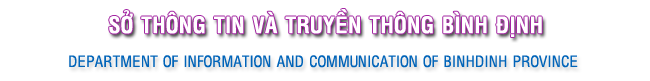
<style>
.page{position:relative;width:650px;height:81px;background:#ffffff}
.page>*{position:absolute;margin:0}
.t1{font:22.1px "VNI-Helve-Condense-Bold";color:#ffffff}
.t2{font:15.1px "VNI-Helve-Condense";color:#0164b9}
</style>
<div class="page">
<p class="t1" style="left:109px;top:9px;width:433px;height:28px">SÔÛ THOÂNG TIN VAØ TRUYEÀN THOÂNG BÌNH ÑÒNH</p>
<p class="t2" style="left:69px;top:55px;width:509px;height:13px">DEPARTMENT OF INFORMATION AND COMMUNICATION OF BINHDINH PROVINCE</p>
</div>
